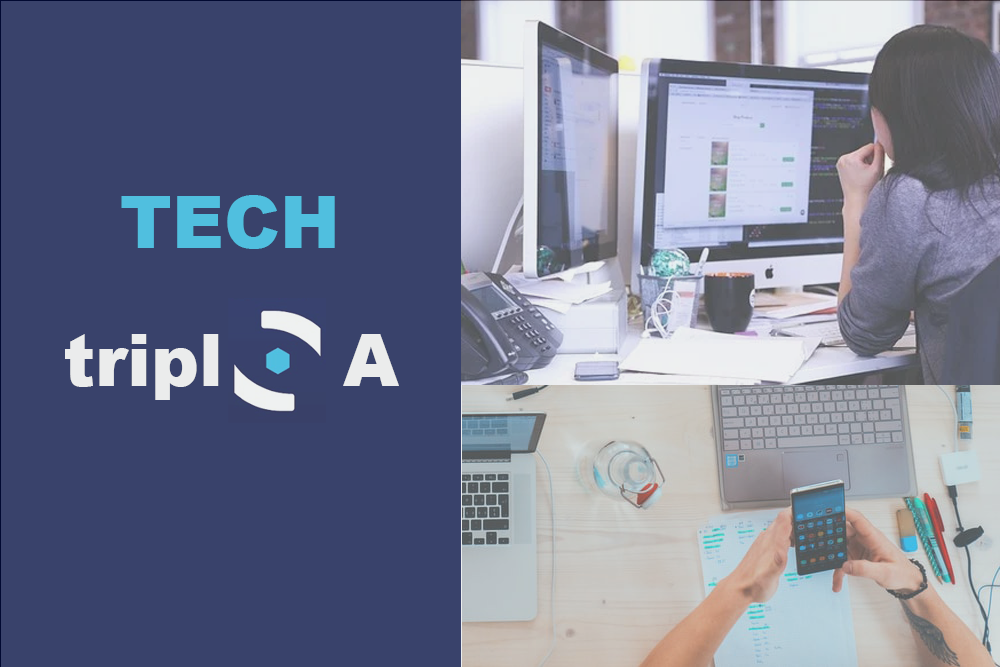
<style>
.page{position:relative;width:1000px;height:667px;background:#39426b}
.page>*{position:absolute;margin:0}
.t1{font:72px "Arial-Black";color:#50bfdf}
.t2{font:72px "Arial-Black";color:#f9f9f9}
</style>
<div class="page">
<p class="t1" style="left:121px;top:195px;width:214px;height:54px">TECH</p>
<p class="t2" style="left:65px;top:334px;width:334px;height:66px">tripl     A</p>
</div>
